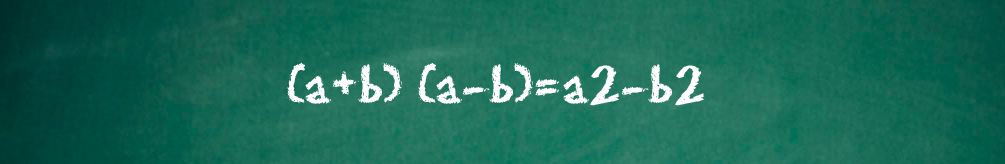
<style>
.page{position:relative;width:1005px;height:164px}
.page>*{position:absolute;margin:0}
.t1{font:100px "EraserDust";color:#ffffff}
</style>
<div class="page">
<p class="t1" style="left:287px;top:62px;width:417px;height:44px">(a+b) (a-b)=a2-b2</p>
</div>
